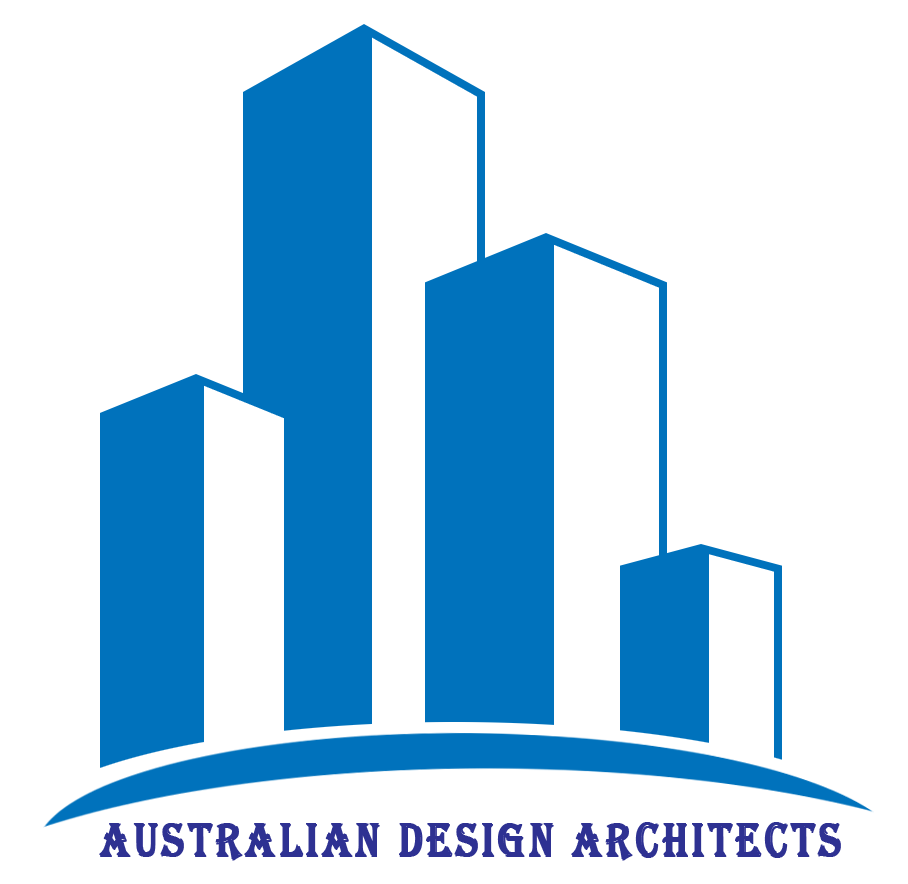
<style>
.page{position:relative;width:908px;height:884px;background:#ffffff}
.page>*{position:absolute;margin:0}
.t1{font:12px "Algerian";letter-spacing:0.075em;color:#2e3192;font-weight:bold;scale:0.8 1}
</style>
<div class="page">
<p class="t1" style="left:99px;top:822px;width:742px;height:39px">Australian Design Architects</p>
</div>
